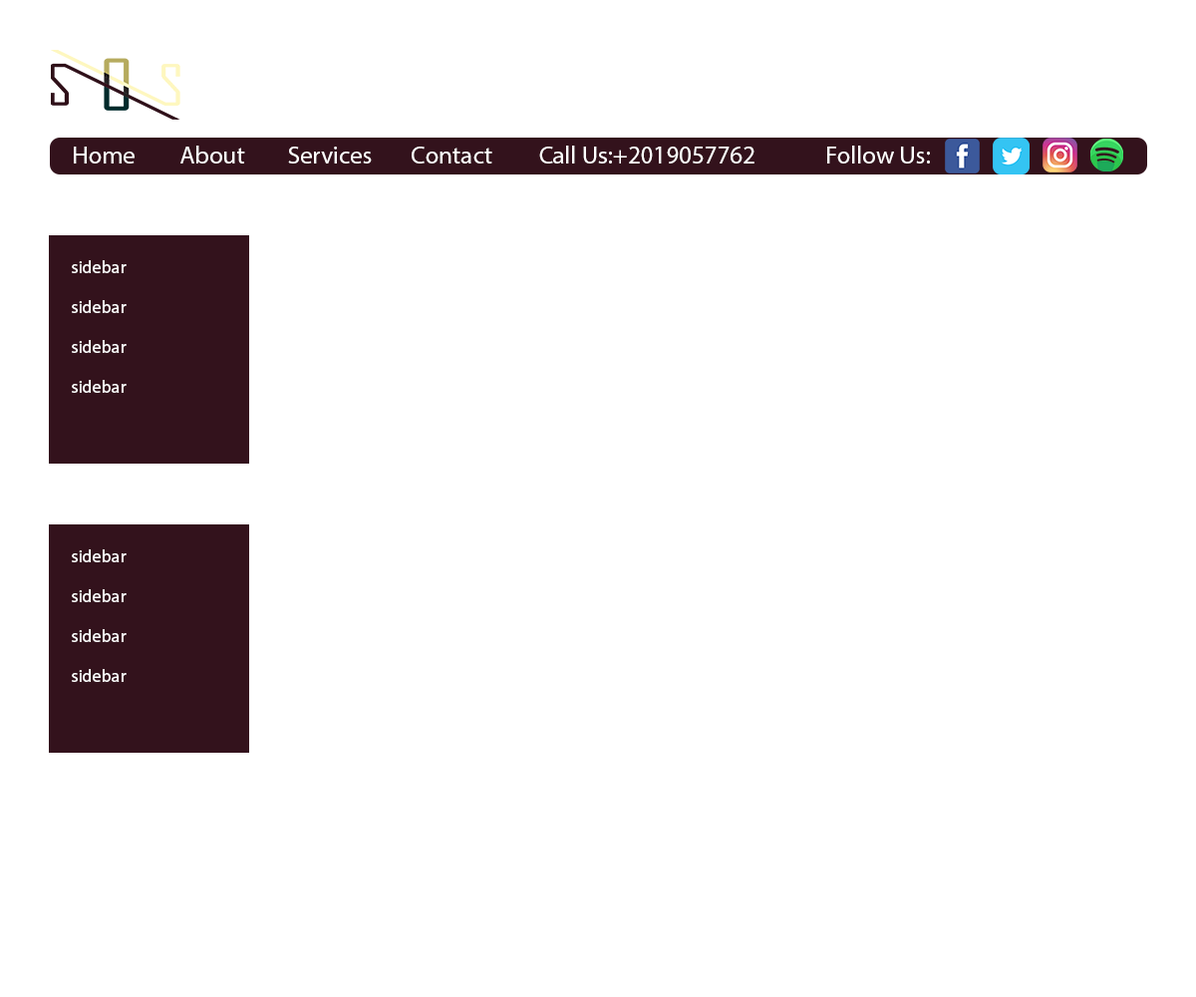
<style>
.page{position:relative;width:1196px;height:997px;background:#ffffff}
.page>*{position:absolute;margin:0}
.t1{font:24.9px "MyriadPro-Regular";color:#ffffff}
.t2{font:24.9px "MyriadArabic-Regular";color:#ffffff}
</style>
<div class="page">
<p class="t1" style="left:74px;top:146px;width:856px;height:17px">Home  About  Services    Contact  Call Us:+2019057762  Follow Us:</p>
<p class="t2" style="left:72px;top:260px;width:55px;height:13px">sidebar</p>
<p class="t2" style="left:72px;top:300px;width:55px;height:13px">sidebar</p>
<p class="t2" style="left:72px;top:340px;width:55px;height:13px">sidebar</p>
<p class="t2" style="left:72px;top:380px;width:55px;height:13px">sidebar</p>
<p class="t2" style="left:72px;top:549px;width:55px;height:13px">sidebar</p>
<p class="t2" style="left:72px;top:589px;width:55px;height:13px">sidebar</p>
<p class="t2" style="left:72px;top:629px;width:55px;height:13px">sidebar</p>
<p class="t2" style="left:72px;top:669px;width:55px;height:13px">sidebar</p>
</div>
